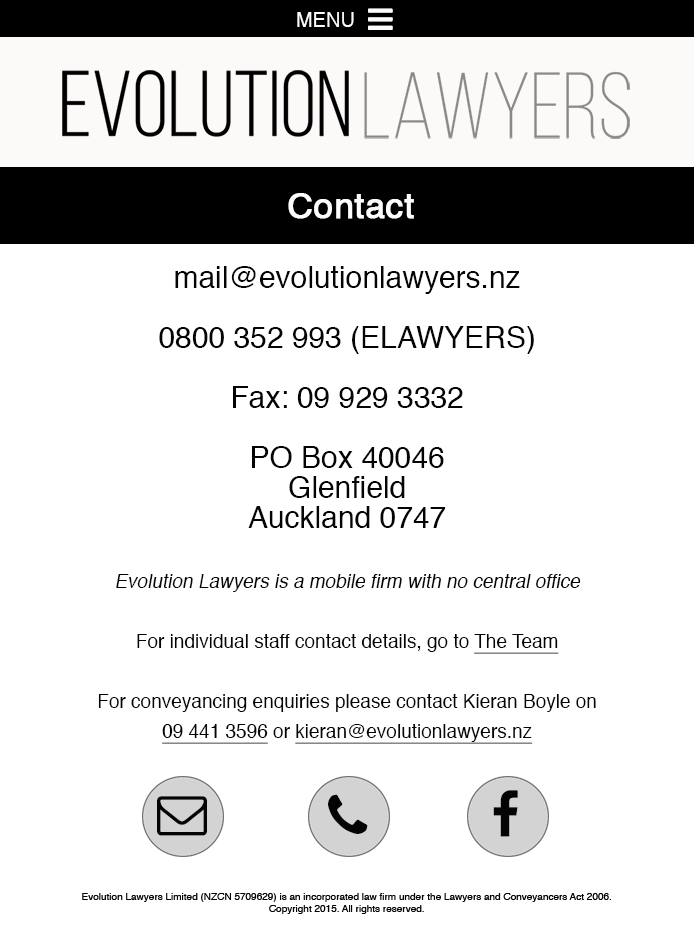
<style>
.page{position:relative;width:694px;height:935px;background:#ffffff}
.page>*{position:absolute;margin:0}
.t1{font:20px "Helvetica";color:#fdfcfc}
.t2{font:35px "Helvetica";color:#fdfcfc;font-weight:bold}
.t3{font:30px/30px "Helvetica";color:#040404}
.t4{font:19px/30px "Helvetica";color:#040404;font-style:italic}
.t5{font:19px/30px "Helvetica";color:#040404}
.t6{font:19px/30px "Helvetica";color:#040404;text-decoration:underline}
</style>
<div class="page">
<p class="t1" style="left:297px;top:12px;width:57px;height:15px">MENU</p>
<p class="t2" style="left:288px;top:193px;width:126px;height:26px">Contact</p>
<p class="t3" style="left:98px;top:266px;width:498px;height:478px;text-align:center">mail@evolutionlawyers.nz<br><br>0800 352 993 (ELAWYERS)<br><br>Fax: 09 929 3332<br><br>PO Box 40046<br>Glenfield<br>Auckland 0747<br><br><span class="t4">Evolution Lawyers is a mobile firm with no central office<br><br></span><span class="t5">For individual staff contact details, go to </span><span class="t6">The Team<br><br></span><span class="t5">For conveyancing enquiries please contact Kieran Boyle on <br></span><span class="t6">09 441 3596</span><span class="t5"> or </span><span class="t6">kieran@evolutionlawyers.nz</span></p>
</div>
